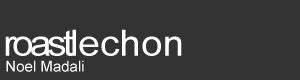
<style>
.page{position:relative;width:300px;height:80px;background:#333333}
.page>*{position:absolute;margin:0}
.t1{font:36.2px "ArialMT";color:#ffffff;scale:1.07 1}
.t2{font:36.2px "ArialMT";letter-spacing:-0.1em;color:#ffffff;scale:1.07 1}
.t3{font:15px "ArialMT";color:#ffffff}
</style>
<div class="page">
<p class="t1" style="left:5px;top:29px;width:177px;height:27px"><span class="t2">roast</span>lechon</p>
<p class="t3" style="left:6px;top:60px;width:78px;height:12px">Noel Madali</p>
</div>
